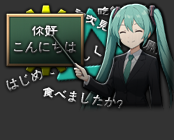
<style>
.page{position:relative;width:174px;height:140px;background:#333333}
.page>*{position:absolute;margin:0}
.t1{font:12.6px "FZZJ-MSHLFW"}
.t2{font:13.1px/16.1px "FZZJ-MSHLFW"}
.t3{font:13px "FZZJ-MSHLFW"}
</style>
<div class="page">
<p class="t1" style="left:97px;top:5px;width:57px;height:11px;rotate:-2deg">吃饭了吗？</p>
<p class="t2" style="left:13px;top:25px;width:64px;height:29px;text-align:center">你好<br>こんにちは</p>
<p class="t3" style="left:6px;top:45px;width:96px;height:47px;rotate:-22deg">はじめてよろしく</p>
<p class="t1" style="left:43px;top:87px;width:80px;height:22px;rotate:8deg">食べましたか？</p>
</div>
